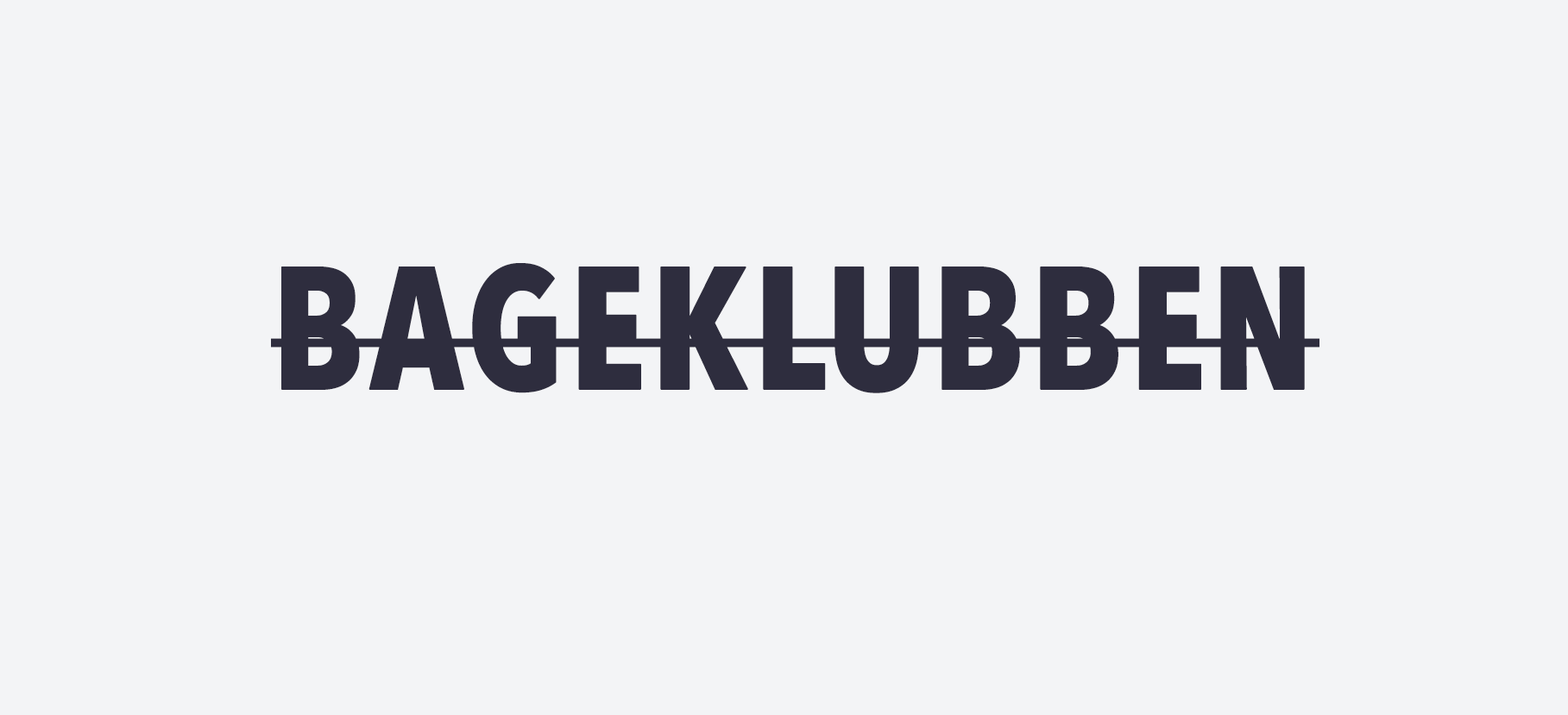
<style>
.page{position:relative;width:1568px;height:715px;background:#f3f4f6}
.page>*{position:absolute;margin:0}
.t1{font:172.6px "AvenirNextCondensed-Bold";color:#2e2d3e;font-weight:bold}
</style>
<div class="page">
<p class="t1" style="left:271px;top:263px;width:1048px;height:131px">BAGEKLUBBEN</p>
</div>
